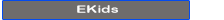
<style>
.page{position:relative;width:224px;height:20px;background:#6e6c6c}
.page>*{position:absolute;margin:0}
.t1{font:10.2px "ArialRoundedMTBold";color:#fcfcfc;scale:1.47 1}
</style>
<div class="page">
<p class="t1" style="left:77px;top:5px;width:41px;height:8px">EKids</p>
</div>
